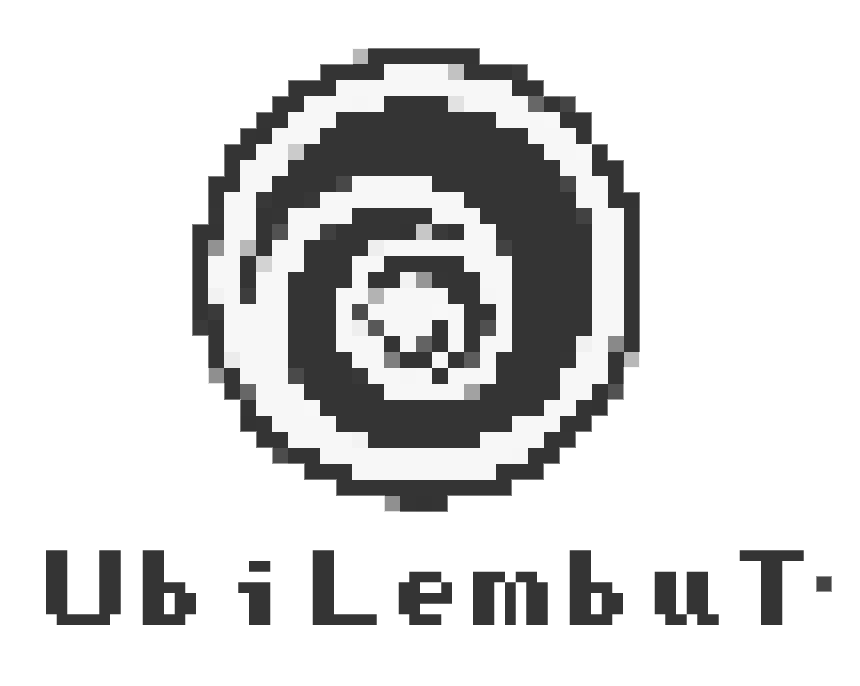
<style>
.page{position:relative;width:860px;height:686px;background:#ffffff}
.page>*{position:absolute;margin:0}
.t1{font:85.4px "PressStartReg";color:#343434}
</style>
<div class="page">
<p class="t1" style="left:46px;top:550px;width:758px;height:75px">UbiLembuT</p>
</div>
